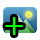
<style>
.page{position:relative;width:40px;height:40px;background:#ffffff}
.page>*{position:absolute;margin:0}
.t1{font:33.9px "MyriadPro-Regular";color:#00ff00}
</style>
<div class="page">
<p class="t1" style="left:5px;top:17px;width:18px;height:18px">+</p>
</div>
